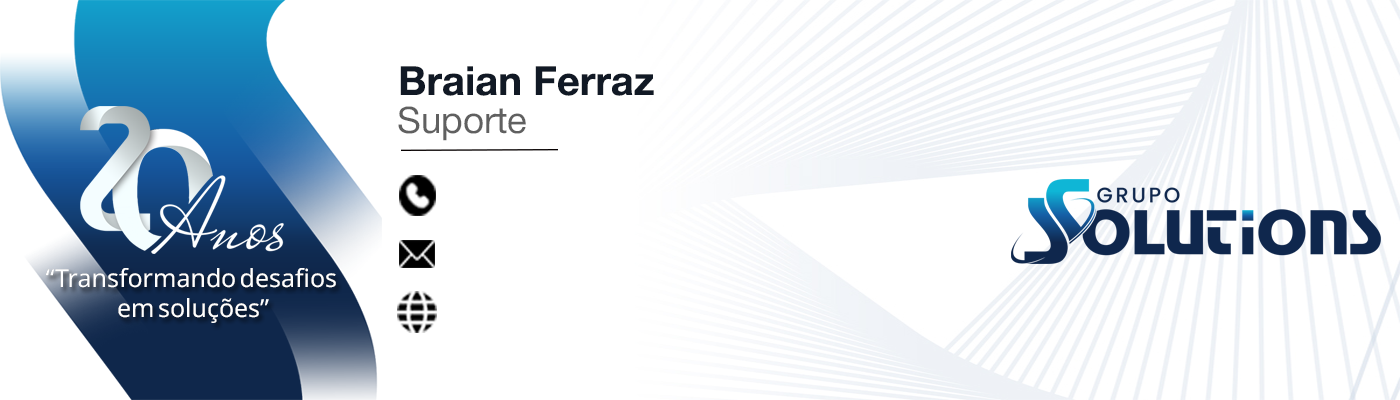
<style>
.page{position:relative;width:1400px;height:400px;background:#ffffff}
.page>*{position:absolute;margin:0}
.t1{font:40px "HelveticaNeue-Bold";color:#111925}
.t2{font:36.7px "HelveticaNeue-Roman";color:#606060}
.t3{font:25px "SansSerifCollection";color:#ffffff}
</style>
<div class="page">
<p class="t1" style="left:400px;top:66px;width:254px;height:30px">Braian Ferraz</p>
<p class="t2" style="left:398px;top:106px;width:128px;height:35px">Suporte</p>
<p class="t3" style="left:45px;top:268px;width:291px;height:55px;text-align:center">“Transformando desafios <br>em soluções”</p>
</div>
